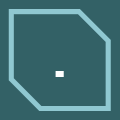
<style>
.page{position:relative;width:120px;height:120px;background:#336166}
.page>*{position:absolute;margin:0}
.t1{font:48px "TransformersMovie";color:#ffffff}
</style>
<div class="page">
<p class="t1" style="left:55px;top:71px;width:9px;height:6px">.</p>
</div>
